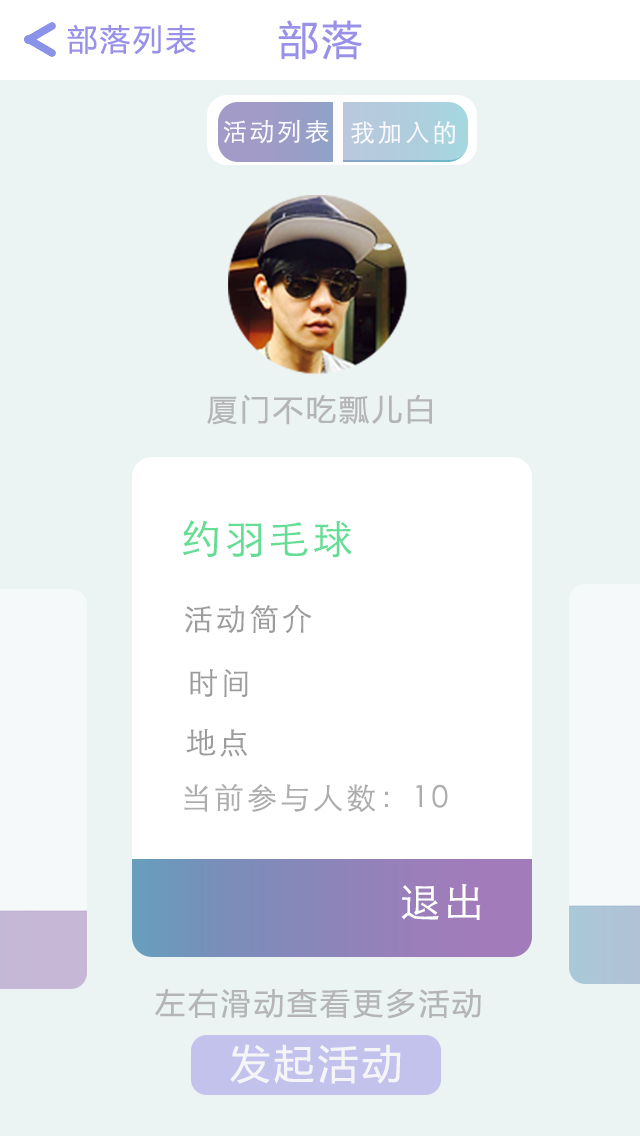
<style>
.page{position:relative;width:640px;height:1136px;background:#ebf3f3}
.page>*{position:absolute;margin:0}
.t1{font:30px "MicrosoftYaHei";letter-spacing:0.1em;color:#9991e8}
.t2{font:40px "MicrosoftYaHei";letter-spacing:0.1em;color:#9991e8}
.t3{font:25px "STXihei";letter-spacing:0.1em;color:#fafafe}
.t4{font:30px "MicrosoftYaHei";letter-spacing:0.1em;color:#b5b5b5}
.t5{font:40px "STXihei";letter-spacing:0.1em;color:#63de94}
.t6{font:30px "STXihei";letter-spacing:0.1em;color:#9d9c9c}
.t7{font:30px "STXihei";letter-spacing:0.1em;color:#aeadad}
.t8{font:40px "STXihei";letter-spacing:0.1em;color:#ffffff}
.t9{font:40px "MicrosoftYaHei";letter-spacing:0.1em;color:#f5f5f8}
</style>
<div class="page">
<p class="t1" style="left:67px;top:24px;width:129px;height:31px">部落列表</p>
<p class="t2" style="left:278px;top:20px;width:84px;height:40px">部落</p>
<p class="t3" style="left:223px;top:119px;width:106px;height:25px">活动列表</p>
<p class="t3" style="left:351px;top:121px;width:104px;height:23px">我加入的</p>
<p class="t4" style="left:207px;top:394px;width:225px;height:31px">厦门不吃瓢儿白</p>
<p class="t5" style="left:183px;top:520px;width:169px;height:38px">约羽毛球</p>
<p class="t6" style="left:185px;top:604px;width:127px;height:29px">活动简介</p>
<p class="t6" style="left:190px;top:669px;width:58px;height:28px">时间</p>
<p class="t6" style="left:186px;top:729px;width:61px;height:28px">地点</p>
<p class="t7" style="left:184px;top:783px;width:264px;height:29px">当前参与人数：10</p>
<p class="t8" style="left:401px;top:883px;width:80px;height:37px">退出</p>
<p class="t4" style="left:155px;top:988px;width:326px;height:31px">左右滑动查看更多活动</p>
<p class="t9" style="left:230px;top:1044px;width:171px;height:40px">发起活动</p>
</div>
